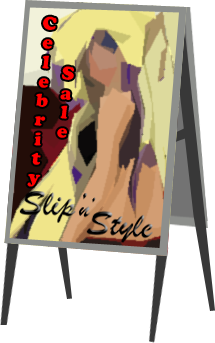
<style>
.page{position:relative;width:215px;height:343px;background:#ffffff}
.page>*{position:absolute;margin:0}
.t1{font:19.4px "CooperBlack";color:#ff0000}
</style>
<div class="page">
<p class="t1" style="left:27px;top:16px;width:47px;height:171px;text-align:center;rotate:6deg">Sale<br>Celebrity</p>
</div>
